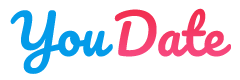
<style>
.page{position:relative;width:240px;height:80px;background:#ffffff}
.page>*{position:absolute;margin:0}
.t1{font:54px "Pacifico-Regular";color:#049be9}
.t2{font:54px "Pacifico-Regular";color:#f43b67}
</style>
<div class="page">
<p class="t1" style="left:10px;top:10px;width:103px;height:64px">You</p>
<p class="t2" style="left:114px;top:8px;width:117px;height:49px">Date</p>
</div>
